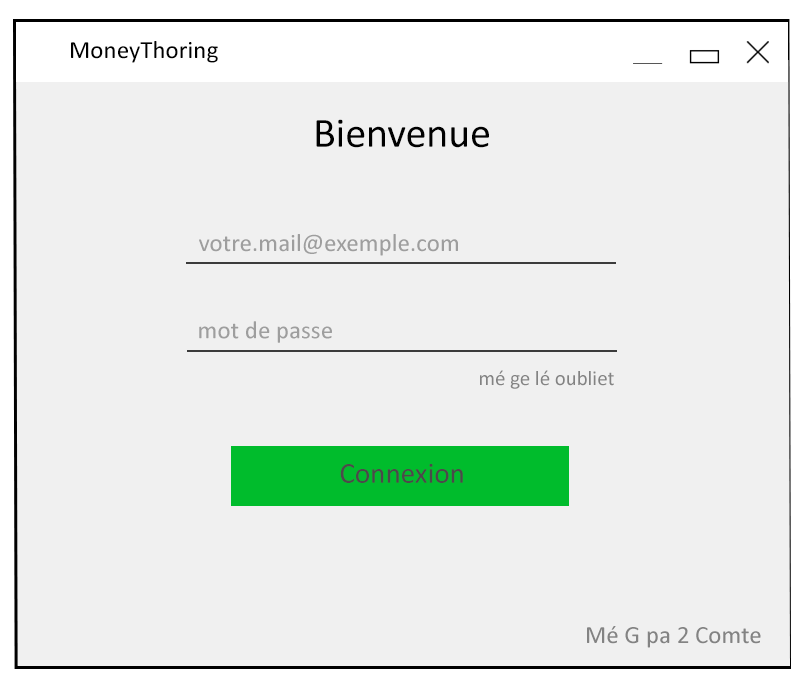
<style>
.page{position:relative;width:806px;height:692px;background:#f0f0f0}
.page>*{position:absolute;margin:0}
.t1{font:25px "Calibri";color:#010101}
.t2{font:41.7px "Calibri";color:#000000}
.t3{font:25px "Calibri";color:#9e9e9e}
.t4{font:20.8px "Calibri";color:#838383}
.t5{font:29.2px "Calibri";color:#4a4a4a}
.t6{font:25px "Calibri";color:#838383}
</style>
<div class="page">
<p class="t1" style="left:71px;top:41px;width:147px;height:22px">MoneyThoring</p>
<p class="t2" style="left:316px;top:119px;width:173px;height:29px">Bienvenue</p>
<p class="t3" style="left:199px;top:234px;width:259px;height:22px">votre.mail@exemple.com</p>
<p class="t3" style="left:199px;top:321px;width:133px;height:22px">mot de passe</p>
<p class="t4" style="left:480px;top:370px;width:134px;height:19px">mé ge lé oubliet</p>
<p class="t5" style="left:340px;top:464px;width:123px;height:19px">Connexion</p>
<p class="t6" style="left:587px;top:626px;width:174px;height:22px">Mé G pa 2 Comte</p>
</div>
